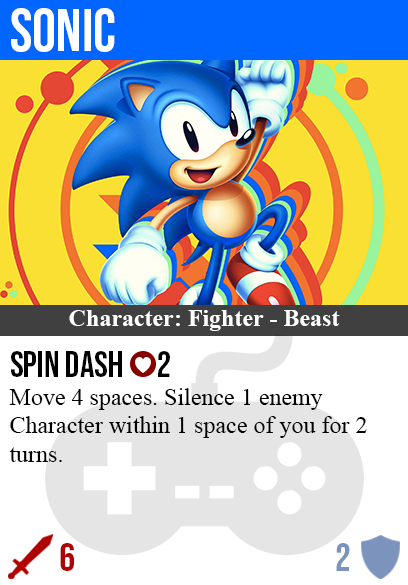
<style>
.page{position:relative;width:408px;height:585px;background:#ffffff}
.page>*{position:absolute;margin:0}
.t1{font:60px "BebasNeue-Regular";color:#ffffff}
.t2{font:24px "TimesNewRomanPS-BoldMT";color:#ffffff}
.t3{font:36px "BebasNeue-Regular";color:#000000}
.t4{font:24px "TimesNewRomanPSMT";color:#000000}
.t5{font:40px "BebasNeue-Regular";color:#af0202}
.t6{font:40px "BebasNeue-Regular";color:#7c94bd}
</style>
<div class="page">
<p class="t1" style="left:11px;top:8px;width:104px;height:44px">sonic</p>
<p class="t2" style="left:69px;top:310px;width:271px;height:21px">Character: Fighter - Beast</p>
<p class="t3" style="left:11px;top:351px;width:159px;height:26px">spin dash      2</p>
<p class="t4" style="left:9px;top:388px;width:358px;height:74px">Move 4 spaces. Silence 1 enemy<br>Character within 1 space of you for 2<br>turns.</p>
<p class="t5" style="left:60px;top:543px;width:14px;height:28px">6</p>
<p class="t6" style="left:336px;top:543px;width:14px;height:28px">2</p>
</div>
